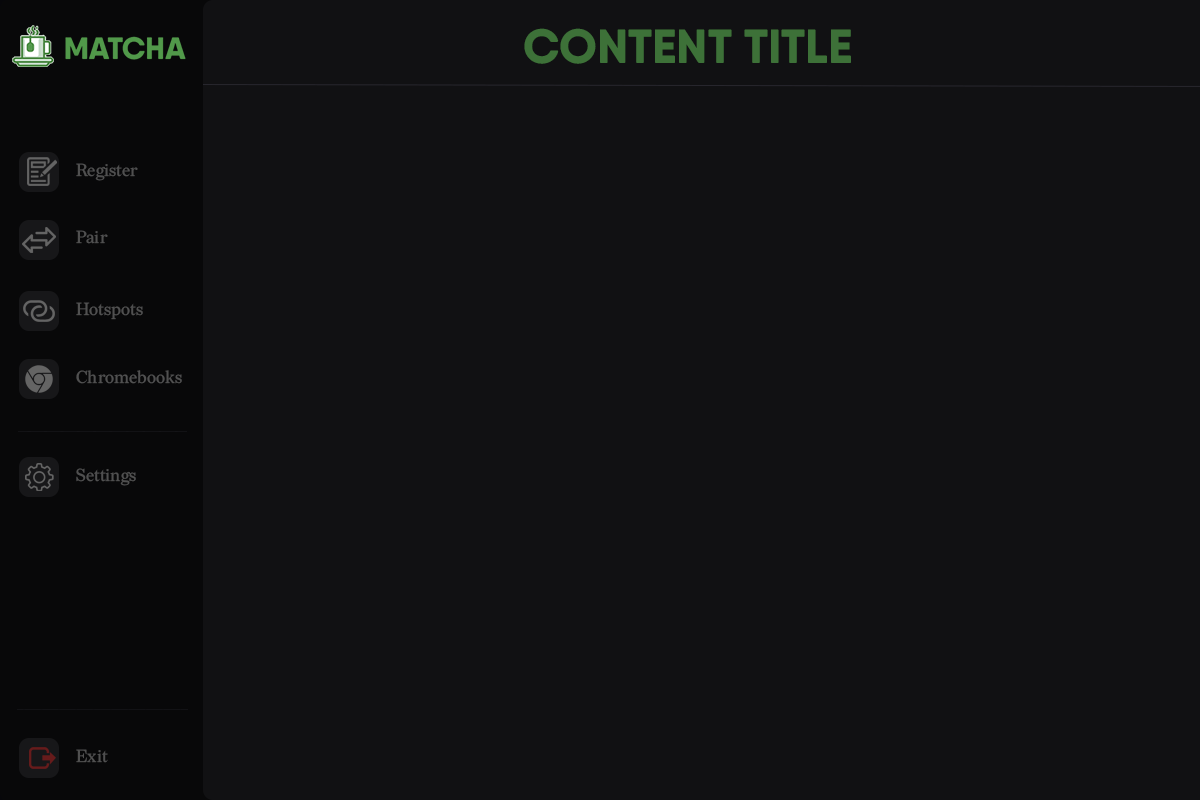
<style>
.page{position:relative;width:1200px;height:800px;background:#111113}
.page>*{position:absolute;margin:0}
.t1{font:48px "QanelasSoftDEMO-ExtraBold";color:#3d7138}
.t2{font:17.4px "Redaction-Regular";color:#505050}
</style>
<div class="page">
<p class="t1" style="left:524px;top:28px;width:327px;height:36px">CONTENT TITLE</p>
<p class="t2" style="left:76px;top:163px;width:62px;height:18px">Register</p>
<p class="t2" style="left:76px;top:230px;width:32px;height:14px">Pair</p>
<p class="t2" style="left:76px;top:302px;width:67px;height:18px">Hotspots</p>
<p class="t2" style="left:76px;top:370px;width:106px;height:14px">Chromebooks</p>
<p class="t2" style="left:76px;top:468px;width:60px;height:18px">Settings</p>
<p class="t2" style="left:76px;top:749px;width:32px;height:14px">Exit</p>
</div>
